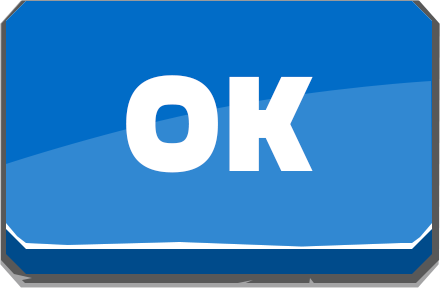
<style>
.page{position:relative;width:440px;height:289px;background:#3188d2}
.page>*{position:absolute;margin:0}
.t1{font:132.5px "MovaviGrotesqueBlack";color:#ffffff}
</style>
<div class="page">
<p class="t1" style="left:126px;top:75px;width:187px;height:98px">OK</p>
</div>
